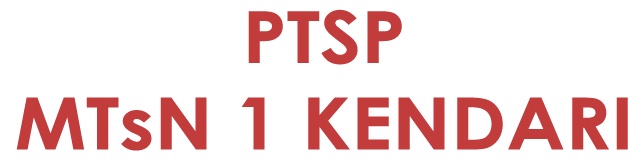
<style>
.page{position:relative;width:643px;height:163px;background:#ffffff}
.page>*{position:absolute;margin:0}
.t1{font:72px "CenturyGothic-Bold";color:#c33c3c;scale:1.1 1}
</style>
<div class="page">
<p class="t1" style="left:16px;top:9px;width:612px;height:142px;text-align:center">PTSP<br>MTsN 1 KENDARI</p>
</div>
